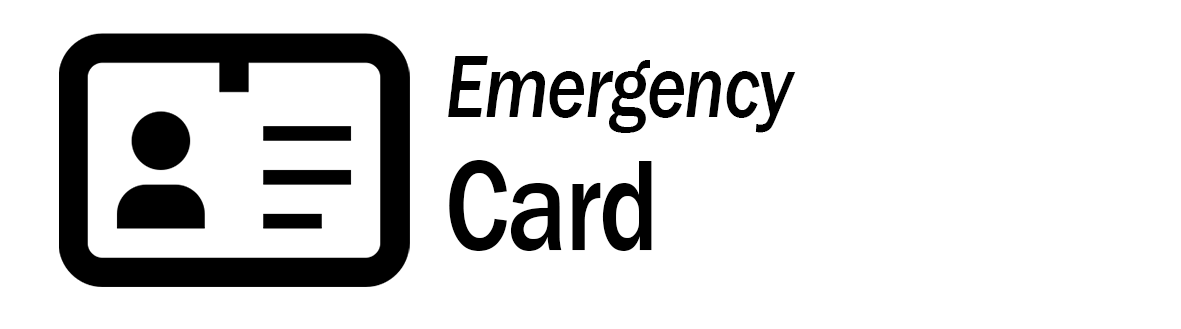
<style>
.page{position:relative;width:1181px;height:329px;background:#ffffff}
.page>*{position:absolute;margin:0}
.t1{font:90.6px/133.4px "FranklinGothic-MediumItalic";letter-spacing:-0.02em;color:#000000;scale:0.83 1}
.t2{font:132.9px/133.4px "FranklinGothic-Medium";letter-spacing:-0.02em;color:#000000;scale:0.83 1}
</style>
<div class="page">
<p class="t1" style="left:448px;top:56px;width:348px;height:195px">Emergency<br><span class="t2">Card</span></p>
</div>
